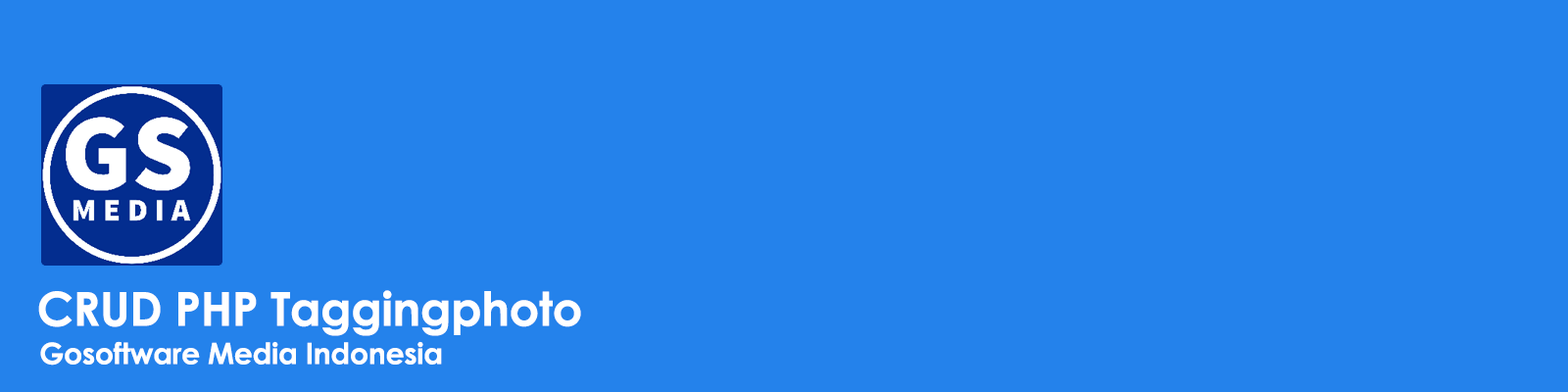
<style>
.page{position:relative;width:1568px;height:392px;background:#2482eb}
.page>*{position:absolute;margin:0}
.t1{font:47px "CenturyGothic-Bold";letter-spacing:-0.01em;color:#ffffff}
.t2{font:29.4px "CenturyGothic-Bold";letter-spacing:-0.01em;color:#ffffff}
</style>
<div class="page">
<p class="t1" style="left:38px;top:290px;width:543px;height:46px">CRUD PHP Taggingphoto</p>
<p class="t2" style="left:40px;top:341px;width:402px;height:25px">Gosoftware Media Indonesia</p>
</div>
